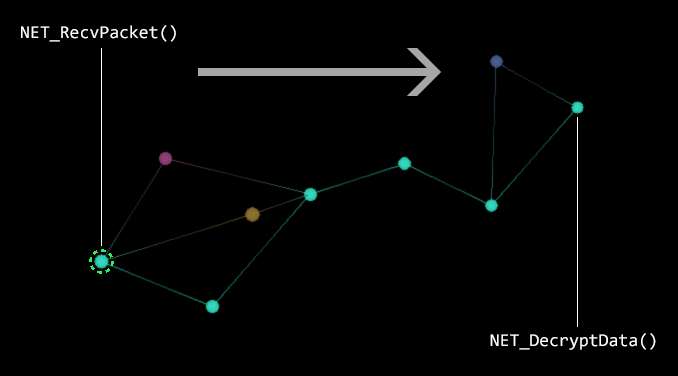
<style>
.page{position:relative;width:678px;height:376px;background:#000000}
.page>*{position:absolute;margin:0}
.t1{font:18px "Consolas";color:#ffffff}
</style>
<div class="page">
<p class="t1" style="left:21px;top:25px;width:155px;height:17px">NET_RecvPacket()</p>
<p class="t1" style="left:490px;top:333px;width:166px;height:17px">NET_DecryptData()</p>
</div>
